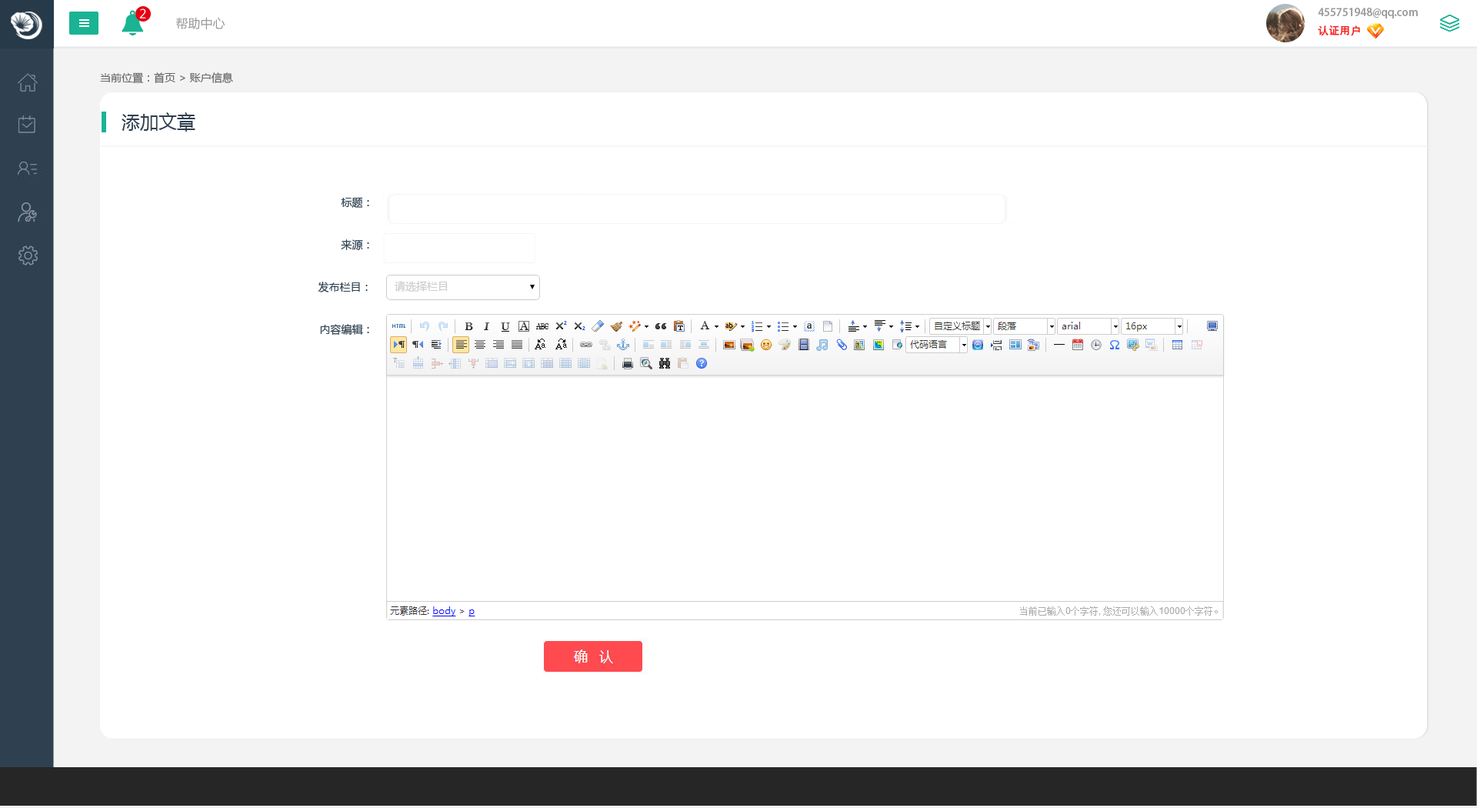
<style>
.page{position:relative;width:1477px;height:808px;background:#ffffff}
.page>*{position:absolute;margin:0}
.t1{font:12.3px "MicrosoftYaHei";color:#ffffff}
.t2{font:12.3px "MicrosoftYaHei";color:#999999}
.t3{font:10.8px/18.5px "AdobeHeitiStd-Regular";color:#999999}
.t4{font:10.8px/18.5px "AdobeHeitiStd-Regular";color:#f61e1e}
.t5{font:10.8px/18.5px "AdobeHeitiStd-Regular";color:#ffffff}
.t6{font:10.8px "MicrosoftYaHei";color:#666666}
.t7{font:18.5px "MicrosoftYaHei";color:#2f4050}
.t8{font:10.8px/42.3px "MicrosoftYaHei";color:#2f4050}
.t9{font:10.8px "MicrosoftYaHei";color:#cccccc}
</style>
<div class="page">
<p class="t1" style="left:139px;top:8px;width:7px;height:10px">2</p>
<p class="t2" style="left:176px;top:17px;width:49px;height:13px">帮助中心</p>
<p class="t3" style="left:1317px;top:8px;width:100px;height:28px">455751948@qq.com<br><span class="t4">认证用户               </span><span class="t5">退出</span></p>
<p class="t6" style="left:100px;top:72px;width:133px;height:11px">当前位置：首页 &gt; 账户信息</p>
<p class="t7" style="left:122px;top:112px;width:73px;height:20px">添加文章</p>
<p class="t8" style="left:318px;top:197px;width:51px;height:138px;text-align:right">标题：<br>来源：<br>发布栏目： <br>内容编辑：</p>
<p class="t9" style="left:395px;top:281px;width:52px;height:10px">请选择栏目</p>
</div>
